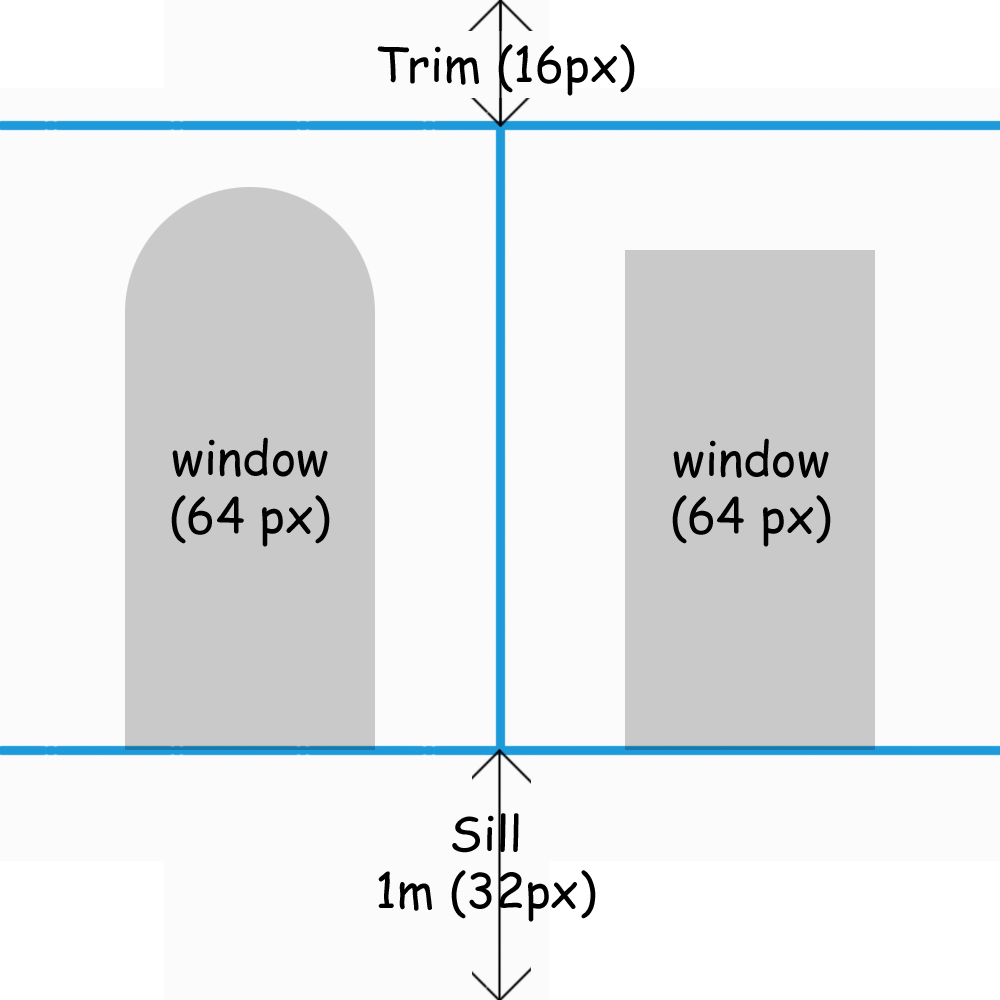
<style>
.page{position:relative;width:1000px;height:1000px;background:#fbfbfb}
.page>*{position:absolute;margin:0}
.t1{font:48px "ComicSansMS";color:#000000}
</style>
<div class="page">
<p class="t1" style="left:377px;top:44px;width:258px;height:52px">Trim (16px)</p>
<p class="t1" style="left:171px;top:437px;width:159px;height:110px;text-align:center">window<br>(64 px)</p>
<p class="t1" style="left:672px;top:438px;width:159px;height:109px;text-align:center">window<br>(64 px)</p>
<p class="t1" style="left:378px;top:813px;width:218px;height:109px;text-align:center">Sill<br>1m (32px)</p>
</div>
